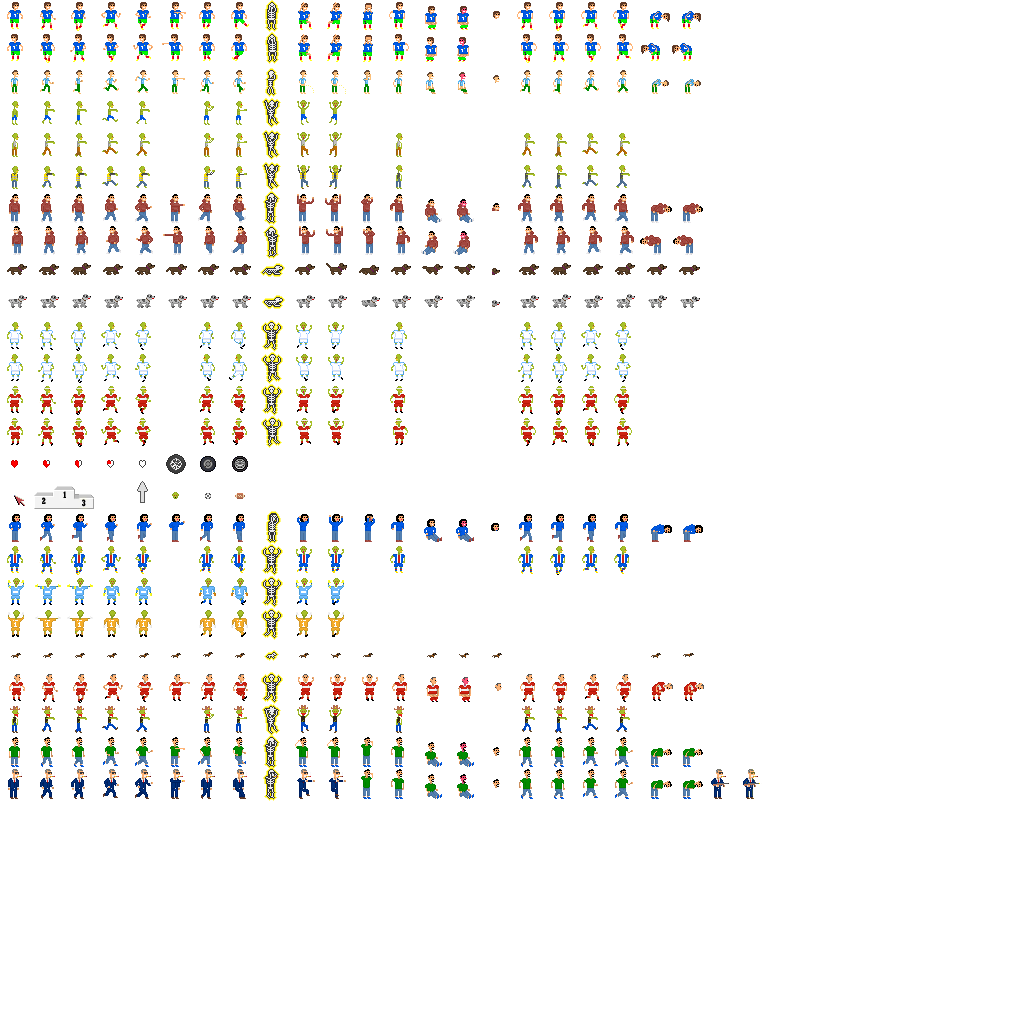
<style>
.page{position:relative;width:1024px;height:1024px;background:#ffffff}
.page>*{position:absolute;margin:0}
.t1{font:9px "Rockwell-CondensedBold";color:#000000}
</style>
<div class="page">
<p class="t1" style="left:42px;top:497px;width:4px;height:7px">2</p>
<p class="t1" style="left:63px;top:491px;width:3px;height:7px">1</p>
<p class="t1" style="left:82px;top:499px;width:4px;height:8px">3</p>
</div>
